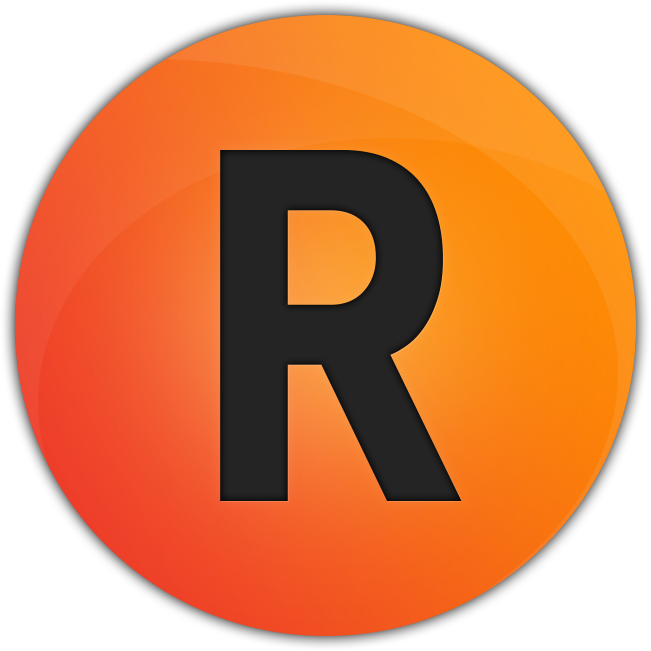
<style>
.page{position:relative;width:651px;height:651px;background:#ffffff}
.page>*{position:absolute;margin:0}
.t1{font:450px "DeansgateCondensed-Bold";color:#242424}
</style>
<div class="page">
<p class="t1" style="left:220px;top:150px;width:242px;height:351px">R</p>
</div>
